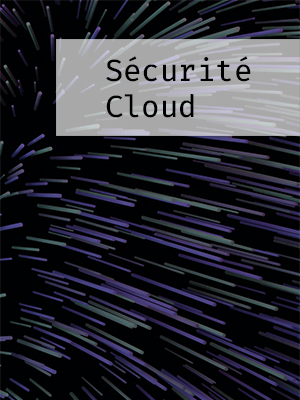
<style>
.page{position:relative;width:300px;height:400px}
.page>*{position:absolute;margin:0}
.t1{font:30px "FiraCodeNerdFontCompleteM-Retina";color:#000000}
</style>
<div class="page">
<p class="t1" style="left:106px;top:56px;width:145px;height:62px">Sécurité<br>Cloud</p>
</div>
